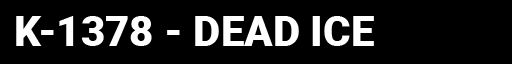
<style>
.page{position:relative;width:512px;height:64px;background:#000000}
.page>*{position:absolute;margin:0}
.t1{font:42px "Roboto-Black";color:#ffffff}
</style>
<div class="page">
<p class="t1" style="left:16px;top:16px;width:358px;height:30px">K-1378 - DEAD ICE</p>
</div>
